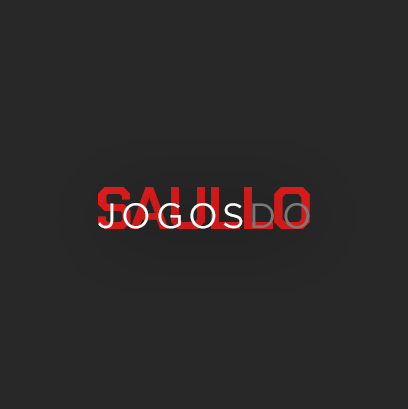
<style>
.page{position:relative;width:408px;height:409px;background:#282828}
.page>*{position:absolute;margin:0}
.t1{font:59.9px "ChakraPetch-Bold";letter-spacing:-0.02em;color:#d21a1a}
.t2{font:34.9px "Gotham-Book";letter-spacing:0.14em;color:#ffffff}
.t3{font:34.9px "Gotham-Book";letter-spacing:0.14em;color:#797979}
</style>
<div class="page">
<p class="t1" style="left:98px;top:187px;width:212px;height:42px">SAULLO</p>
<p class="t2" style="left:98px;top:203px;width:212px;height:26px">JOGOS<span class="t3">DO</span></p>
</div>
